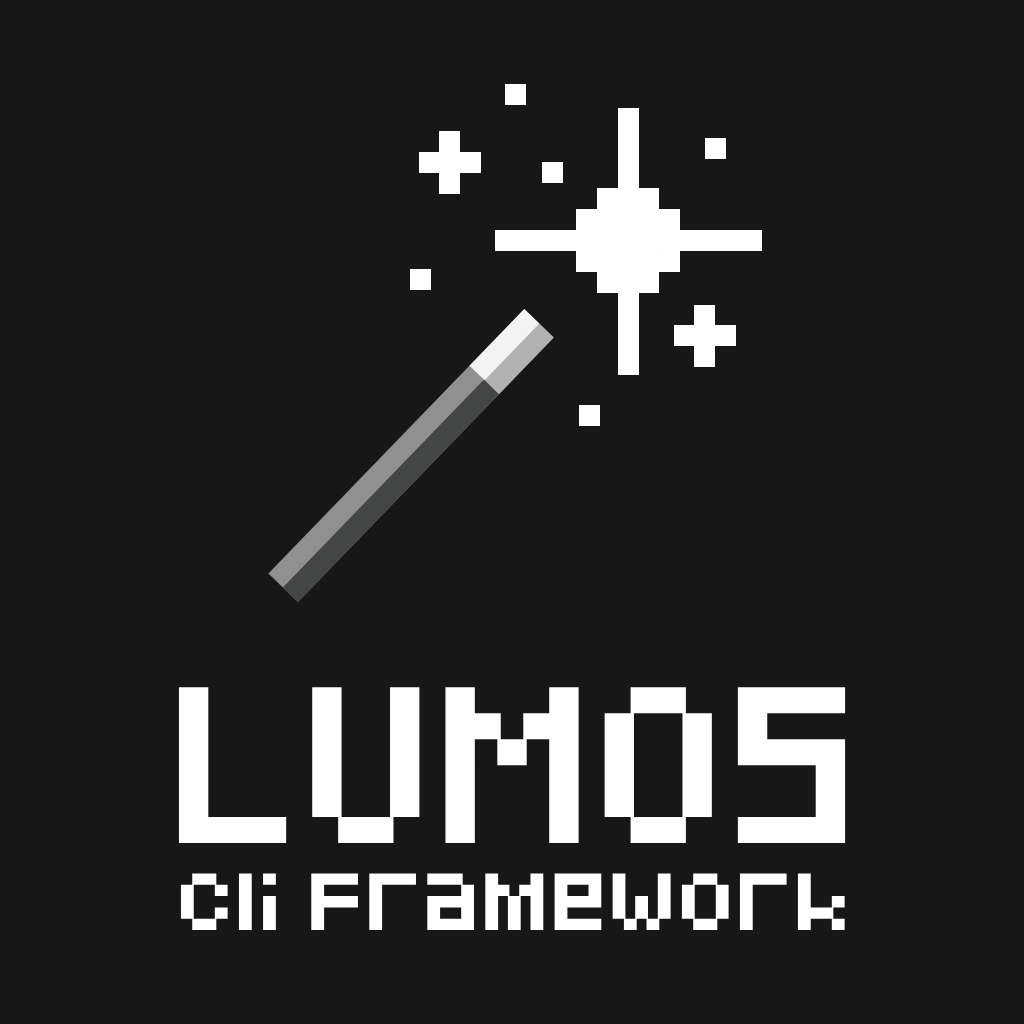
<style>
.page{position:relative;width:1024px;height:1024px;background:#171717}
.page>*{position:absolute;margin:0}
.t1{font:129.7px "Pixeled";color:#ffffff;font-weight:bold}
.t2{font:56.5px "Pixeled";color:#ffffff;font-weight:bold}
</style>
<div class="page">
<p class="t1" style="left:178px;top:687px;width:668px;height:157px">LUMOS</p>
<p class="t2" style="left:180px;top:873px;width:665px;height:58px">cli framework</p>
</div>
